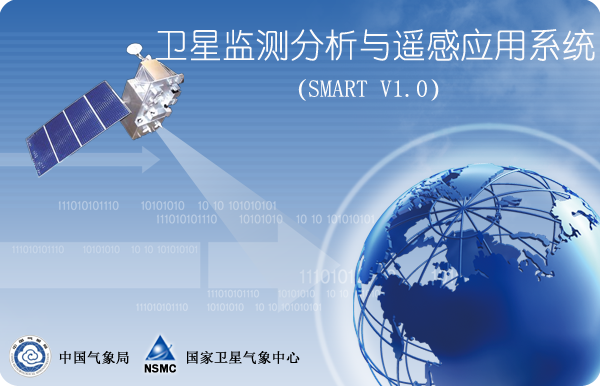
<style>
.page{position:relative;width:600px;height:386px}
.page>*{position:absolute;margin:0}
.t1{font:34px "YouYuan";color:#fcfbfb}
.t2{font:24px "YouYuan";color:#fcfbfb}
</style>
<div class="page">
<p class="t1" style="left:155px;top:28px;width:440px;height:33px">卫星监测分析与遥感应用系统</p>
<p class="t2" style="left:298px;top:79px;width:141px;height:22px">（SMART V1.0）</p>
</div>
